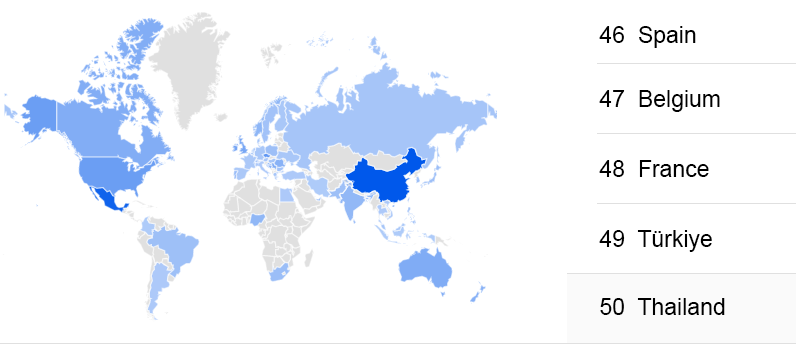
<style>
.page{position:relative;width:796px;height:346px;background:#ffffff}
.page>*{position:absolute;margin:0}
.t1{font:23px "ArialMT";color:#000000}
</style>
<div class="page">
<p class="t1" style="left:599px;top:26px;width:97px;height:22px">46  Spain</p>
<p class="t1" style="left:599px;top:90px;width:121px;height:22px">47  Belgium</p>
<p class="t1" style="left:599px;top:160px;width:110px;height:17px">48  France</p>
<p class="t1" style="left:599px;top:230px;width:113px;height:22px">49  Türkiye</p>
<p class="t1" style="left:600px;top:298px;width:125px;height:17px">50  Thailand</p>
</div>
